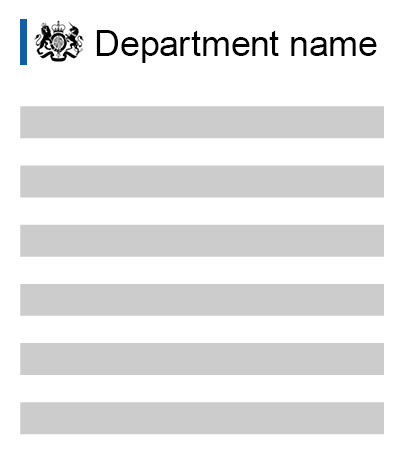
<style>
.page{position:relative;width:404px;height:454px;background:#ffffff}
.page>*{position:absolute;margin:0}
.t1{font:36px "ArialMT";color:#000000}
</style>
<div class="page">
<p class="t1" style="left:96px;top:30px;width:281px;height:33px">Department name</p>
</div>
